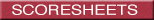
<style>
.page{position:relative;width:154px;height:20px}
.page>*{position:absolute;margin:0}
.t1{font:14px "Helvetica";color:#ffffff;scale:1.2 1}
</style>
<div class="page">
<p class="t1" style="left:12px;top:4px;width:126px;height:11px">SCORESHEETS</p>
</div>
